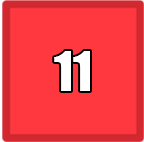
<style>
.page{position:relative;width:144px;height:142px;background:#ff3840}
.page>*{position:absolute;margin:0}
.t1{font:50px "Impact";color:#ffffff}
</style>
<div class="page">
<p class="t1" style="left:54px;top:51px;width:36px;height:40px">11</p>
</div>
